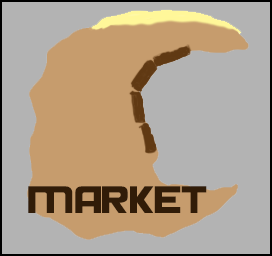
<style>
.page{position:relative;width:272px;height:256px;background:#b3b3b3}
.page>*{position:absolute;margin:0}
.t1{font:33.3px "HyundaiNormal";color:#311c08}
</style>
<div class="page">
<p class="t1" style="left:28px;top:186px;width:179px;height:27px">Market</p>
</div>
